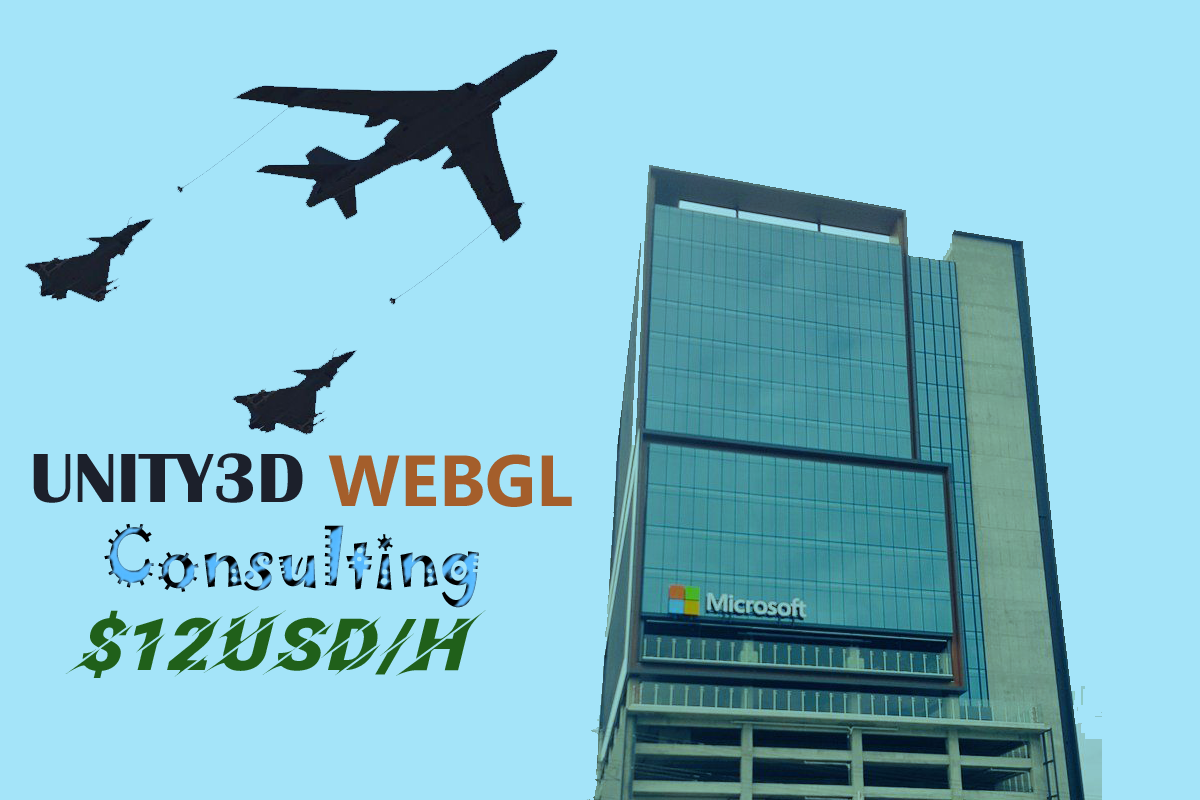
<style>
.page{position:relative;width:1200px;height:800px;background:#a4e4f9}
.page>*{position:absolute;margin:0}
.t1{font:72px "BritannicBold";color:#1c202b}
.t2{font:72px "Gadugi-Bold";color:#a45e2b}
.t3{font:72px "Facon";color:#20601a}
</style>
<div class="page">
<p class="t1" style="left:33px;top:453px;width:270px;height:50px">UNITY3D</p>
<p class="t2" style="left:328px;top:454px;width:244px;height:53px">WEBGL</p>
<p class="t3" style="left:65px;top:606px;width:421px;height:72px">$12USD/h</p>
</div>
